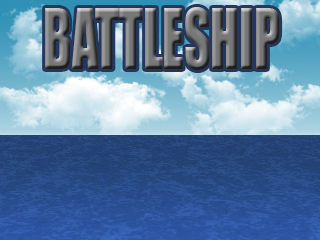
<style>
.page{position:relative;width:320px;height:240px}
.page>*{position:absolute;margin:0}
.t1{font:77.5px "Impact";scale:0.67 1}
</style>
<div class="page">
<p class="t1" style="left:45px;top:7px;width:235px;height:63px">BATTLESHIP</p>
</div>
